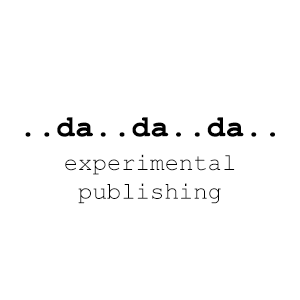
<style>
.page{position:relative;width:300px;height:300px;background:#ffffff}
.page>*{position:absolute;margin:0}
.t1{font:30px "CourierNewPS-BoldMT";color:#000000;font-weight:bold}
.t2{font:24px "CourierNewPSMT";color:#000000}
</style>
<div class="page">
<p class="t1" style="left:25px;top:117px;width:250px;height:20px">..da..da..da..</p>
<p class="t2" style="left:65px;top:154px;width:170px;height:50px;text-align:center">experimental<br>publishing</p>
</div>
